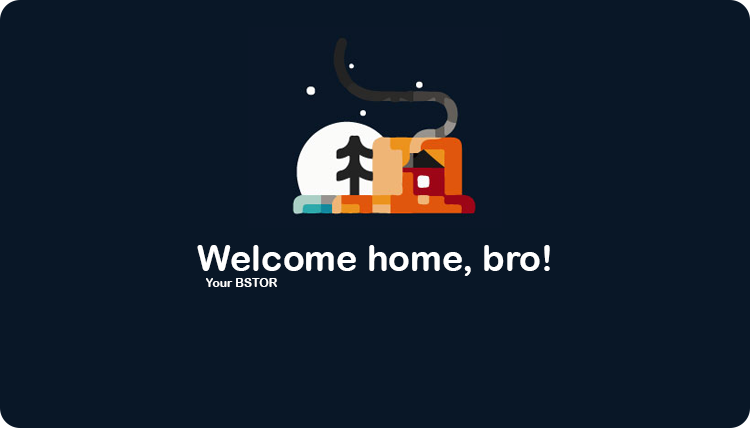
<style>
.page{position:relative;width:750px;height:428px;background:#091727}
.page>*{position:absolute;margin:0}
.t1{font:36px "ArialRoundedMTBold";color:#ffffff}
.t2{font:12px "ArialRoundedMTBold";color:#ffffff}
</style>
<div class="page">
<p class="t1" style="left:197px;top:245px;width:353px;height:31px">Welcome home, bro!</p>
<p class="t2" style="left:206px;top:278px;width:71px;height:9px">Your BSTOR</p>
</div>
